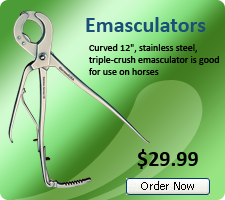
<style>
.page{position:relative;width:225px;height:200px}
.page>*{position:absolute;margin:0}
.t1{font:22px "Calibri-Bold";color:#1b4e78}
.t2{font:10px "Calibri";color:#000000}
.t3{font:22px "Calibri-Bold";color:#000000}
</style>
<div class="page">
<p class="t1" style="left:86px;top:17px;width:120px;height:15px">Emasculators</p>
<p class="t2" style="left:89px;top:44px;width:130px;height:31px">Curved 12", stainless steel, triple-crush emasculator is good for use on horses</p>
<p class="t3" style="left:137px;top:149px;width:61px;height:20px">$29.99</p>
</div>
